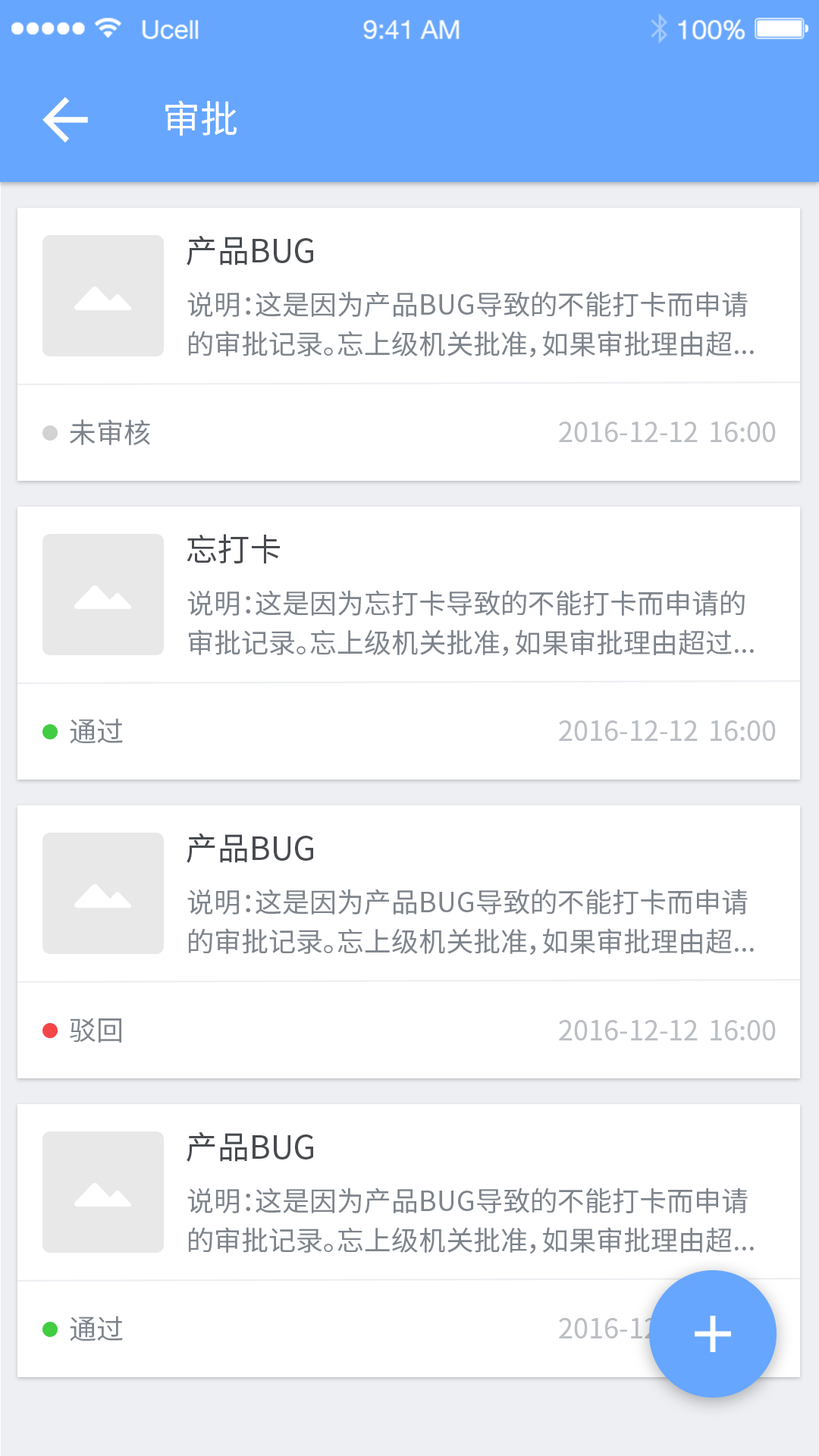
<style>
.page{position:relative;width:819px;height:1456px;background:#ffffff}
.page>*{position:absolute;margin:0}
.t1{font:37.9px "NotoSansHans-Regular";color:#ffffff}
.t2{font:31.9px "NotoSansHans-Regular";color:#474a4f}
.t3{font:27.3px/39.5px "NotoSansHans-Regular";color:#7e848c}
.t4{font:27.6px "NotoSansHans-Regular";color:#7e848c}
.t5{font:27.3px "NotoSansHans-Regular";color:#bbbfc4}
.t6{font:27.3px "NotoSansHans-Regular"}
</style>
<div class="page">
<p class="t1" style="left:165px;top:100px;width:72px;height:36px">审批</p>
<p class="t2" style="left:187px;top:235px;width:126px;height:30px">产品BUG</p>
<p class="t3" style="left:187px;top:291px;width:567px;height:67px">说明：这是因为产品BUG导致的不能打卡而申请的审批记录。忘上级机关批准，如果审批理由超...</p>
<p class="t4" style="left:70px;top:419px;width:80px;height:26px">未审核</p>
<p class="t5" style="left:559px;top:422px;width:217px;height:20px">2016-12-12  16:00</p>
<p class="t2" style="left:187px;top:534px;width:93px;height:29px">忘打卡</p>
<p class="t3" style="left:187px;top:590px;width:567px;height:67px">说明：这是因为忘打卡导致的不能打卡而申请的审批记录。忘上级机关批准，如果审批理由超过...</p>
<p class="t4" style="left:70px;top:718px;width:53px;height:26px">通过</p>
<p class="t5" style="left:559px;top:720px;width:217px;height:21px">2016-12-12  16:00</p>
<p class="t2" style="left:187px;top:833px;width:126px;height:30px">产品BUG</p>
<p class="t3" style="left:187px;top:889px;width:567px;height:66px">说明：这是因为产品BUG导致的不能打卡而申请的审批记录。忘上级机关批准，如果审批理由超...</p>
<p class="t4" style="left:70px;top:1018px;width:51px;height:25px">驳回</p>
<p class="t5" style="left:559px;top:1020px;width:217px;height:20px">2016-12-12  16:00</p>
<p class="t2" style="left:187px;top:1131px;width:126px;height:31px">产品BUG</p>
<p class="t3" style="left:187px;top:1188px;width:567px;height:66px">说明：这是因为产品BUG导致的不能打卡而申请的审批记录。忘上级机关批准，如果审批理由超...</p>
<p class="t4" style="left:70px;top:1316px;width:53px;height:25px">通过</p>
<p class="t6" style="left:559px;top:1318px;width:217px;height:20px">2016-12-12  16:00</p>
</div>
